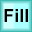
<style>
.page{position:relative;width:32px;height:32px}
.page>*{position:absolute;margin:0}
.t1{font:18px "Arial-BoldMT";color:#000000}
</style>
<div class="page">
<p class="t1" style="left:4px;top:9px;width:24px;height:13px">Fill</p>
</div>
